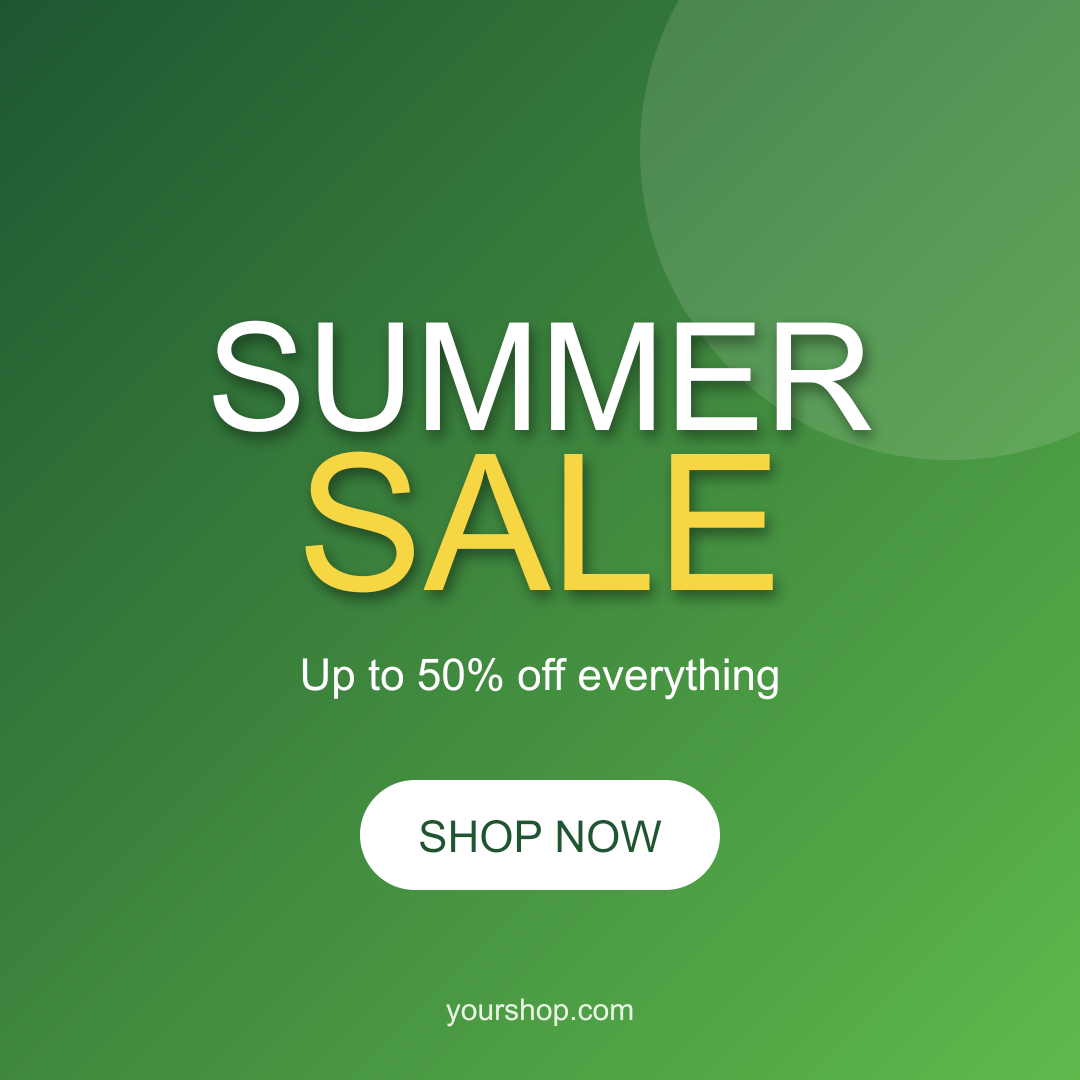
<style>
.page{position:relative;width:1080px;height:1080px}
.page>*{position:absolute;margin:0}
.t1{font:150px "ArialMT";color:#ffffff}
.t2{font:190px "ArialMT";color:#f6d743}
.t3{font:44px "ArialMT";color:#ffffff}
.t4{font:44px "ArialMT";color:#1e5631}
.t5{font:30px "ArialMT";color:#e8f5e3}
</style>
<div class="page">
<p class="t1" style="left:212px;top:320px;width:661px;height:113px">SUMMER</p>
<p class="t2" style="left:304px;top:451px;width:470px;height:143px">SALE</p>
<p class="t3" style="left:301px;top:657px;width:478px;height:44px">Up to 50% off everything</p>
<p class="t4" style="left:419px;top:819px;width:244px;height:35px">SHOP NOW</p>
<p class="t5" style="left:445px;top:998px;width:189px;height:30px">yourshop.com</p>
</div>
